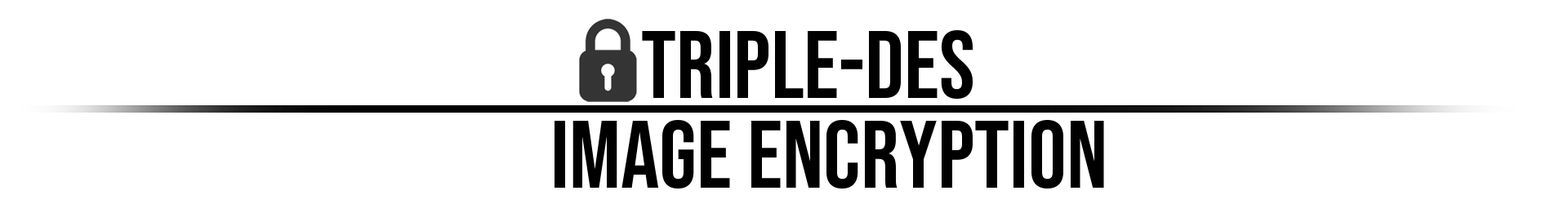
<style>
.page{position:relative;width:1568px;height:213px;background:#ffffff}
.page>*{position:absolute;margin:0}
.t1{font:96.2px "BebasNeue-Regular";color:#000000}
</style>
<div class="page">
<p class="t1" style="left:555px;top:120px;width:549px;height:69px">Image encryption</p>
</div>
